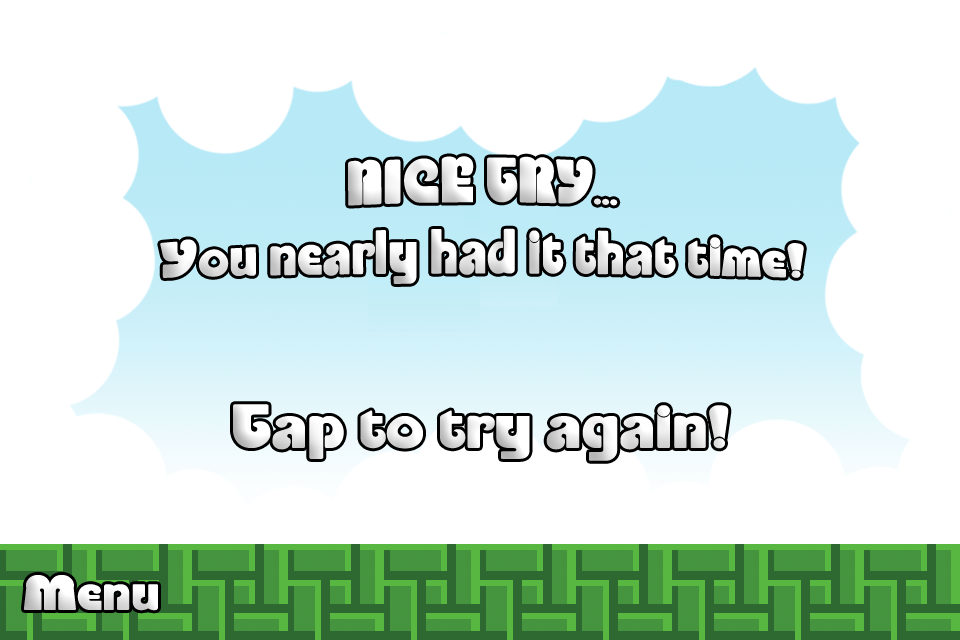
<style>
.page{position:relative;width:960px;height:640px;background:#ffffff}
.page>*{position:absolute;margin:0}
.t1{font:43.2px/56px "Enliven";color:#ffffff;scale:1.11 1}
.t2{font:54px "Enliven";color:#ffffff;scale:1.11 1}
.t3{font:43.2px "Enliven";color:#ededed;scale:1.11 1}
</style>
<div class="page">
<p class="t1" style="left:160px;top:156px;width:644px;height:128px;text-align:center">NICE TRY...<br>You nearly had it that time!</p>
<p class="t2" style="left:233px;top:404px;width:496px;height:57px">Tap to try again!</p>
<p class="t3" style="left:24px;top:575px;width:134px;height:36px">Menu</p>
</div>
